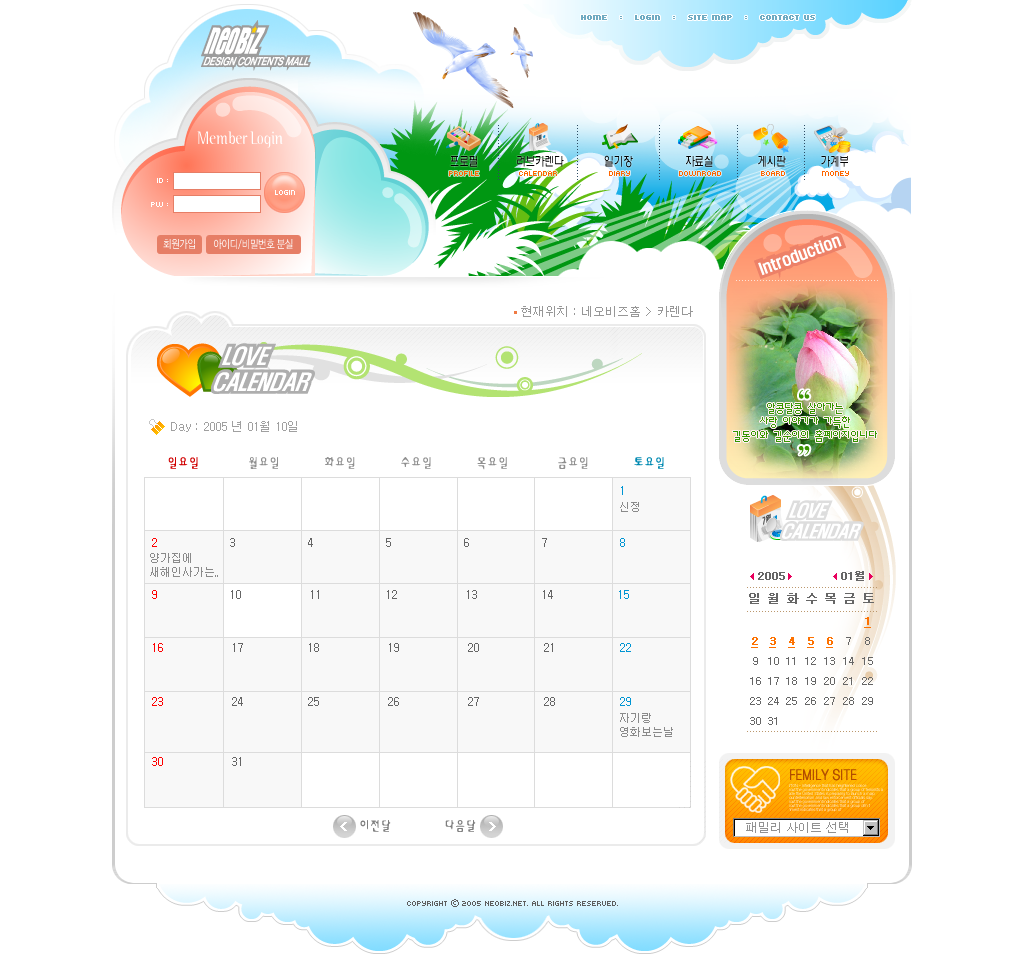
<style>
.page{position:relative;width:1024px;height:962px;background:#ffffff}
.page>*{position:absolute;margin:0}
.t1{font:8px "Kroeger0555";color:#6fabc2;font-weight:bold}
.t2{font:18px "BinaryITCTTLight";color:#ffffff;scale:0.8 1}
.t3{font:13px "H2wulL";letter-spacing:-0.025em;color:#000000;scale:0.75 1}
.t4{font:8px "Kroeger0555";color:#ff6600}
.t5{font:8px/24px "Kroeger0555";color:#ffffff}
.t6{font:8px "Kroeger0555";color:#ffffff}
.t7{font:11px "YDIWebDotum";color:#ffffff;scale:0.8 1}
.t8{font:12px "Dotum";color:#979797}
.t9{font:12px/14px "Á¤9";color:#359700}
.t10{font:12px "Dotum";color:#a0a0a0}
.t11{font:14px "YDIGurmL";color:#8f8f8f;scale:0.9 1}
.t12{font:14px "YDIGurmL";color:#d00000;scale:0.9 1}
.t13{font:14px "YDIGurmL";color:#0089b1;scale:0.9 1}
.t14{font:12px/26px "Dotum";color:#656565}
.t15{font:12px/26px "Dotum";color:#0095d3}
.t16{font:12px/26px "Dotum";color:#ff0000}
.t17{font:12px/27px "Dotum";color:#ff0000}
.t18{font:12px/27px "Dotum";color:#656565}
.t19{font:12px/27px "Dotum";color:#0095d3}
.t20{font:12px/33px "Dotum";color:#ff0000}
.t21{font:12px/33px "Dotum";color:#656565}
.t22{font:11px "Dotum";color:#8a8a8a}
.t23{font:11px/14px "Dotum";color:#8a8a8a}
.t24{font:14px "YDIWebDotum";color:#b24c00;font-weight:bold;scale:0.83 1}
.t25{font:14px "YDIGurmL";color:#7f7f7f;scale:0.9 1}
.t26{font:12px "Dotum";color:#919191}
.t27{font:8px "Kroeger0555";color:#5d5d5d}
.t28{font:8px "YDIWebDotum";color:#5d5d5d}
</style>
<div class="page">
<p class="t1" style="left:581px;top:15px;width:234px;height:5px">Home   :   login   :   Site map   :   Contact us</p>
<p class="t2" style="left:197px;top:131px;width:86px;height:17px">Member Login</p>
<p class="t3" style="left:450px;top:155px;width:398px;height:13px">프로필             러브카렌다              일기장                  자료실               게시판            가계부</p>
<p class="t4" style="left:449px;top:171px;width:400px;height:5px">profile             calendar                 diary                downroad             board            money</p>
<p class="t5" style="left:151px;top:178px;width:17px;height:29px;text-align:right">id :<br>pw :</p>
<p class="t6" style="left:275px;top:190px;width:20px;height:5px">login</p>
<p class="t7" style="left:163px;top:239px;width:130px;height:10px">회원가입        아이디/비밀번호 분실</p>
<p class="t8" style="left:521px;top:306px;width:172px;height:11px">현재위치 : 네오비즈홈 &gt; 카렌다</p>
<p class="t9" style="left:733px;top:403px;width:144px;height:39px;text-align:center">알콩달콩 살아가는 <br>사랑 이야기가 가득한<br>길동이와 길순이의 홈페이지입니다</p>
<p class="t10" style="left:171px;top:421px;width:126px;height:11px">Day : 2005 년 01월 10일</p>
<p class="t11" style="left:168px;top:457px;width:496px;height:13px"><span class="t12">일요일           </span>월요일          화요일          수요일          목요일           금요일          <span class="t13">토요일</span></p>
<p class="t14" style="left:152px;top:486px;width:479px;height:280px"><span class="t15">1<br><br></span><span class="t16">2</span>                  3                  4                  5                  6                  7                  <span class="t15">8<br><br></span><span class="t16">9 </span>                 10                 11                12                 13                14                <span class="t15">15<br><br></span><span class="t17">16 </span><span class="t18">                17                18                 19                 20                21                </span><span class="t19">22<br><br></span><span class="t17">23</span><span class="t18">                 24                25                 26                 27                28                </span><span class="t19">29<br><br></span><span class="t20">30</span><span class="t21">                 31</span></p>
<p class="t22" style="left:620px;top:502px;width:19px;height:10px">신정</p>
<p class="t23" style="left:150px;top:553px;width:68px;height:24px">양가집에<br>새해인사가는..</p>
<p class="t23" style="left:620px;top:713px;width:53px;height:24px">자기랑 <br>영화보는날</p>
<p class="t24" style="left:790px;top:768px;width:67px;height:13px">FEMILY SITE</p>
<p class="t25" style="left:360px;top:820px;width:116px;height:12px">이전달            다음달</p>
<p class="t26" style="left:746px;top:822px;width:102px;height:11px">패밀리 사이트 선택</p>
<p class="t27" style="left:407px;top:899px;width:211px;height:8px">Copyright <span class="t28">ⓒ</span> 2005 NEOBIZ.NET. All rights reserved.</p>
</div>
